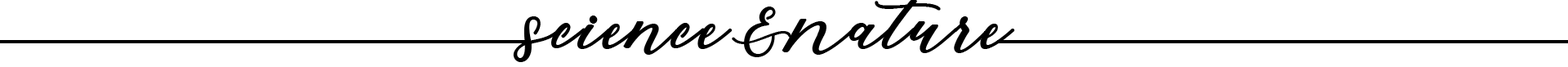
<style>
.page{position:relative;width:1568px;height:67px;background:#ffffff}
.page>*{position:absolute;margin:0}
.t1{font:61.3px "IsabellaScript";color:#000000}
</style>
<div class="page">
<p class="t1" style="left:513px;top:0px;width:502px;height:62px">Science&amp;Nature</p>
</div>
